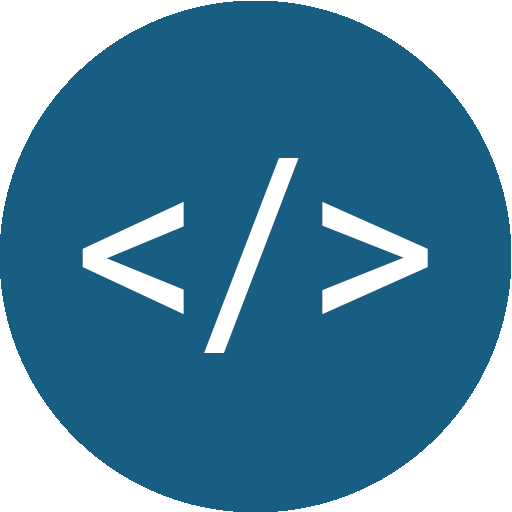
<style>
.page{position:relative;width:512px;height:512px;background:#185e82}
.page>*{position:absolute;margin:0}
.t1{font:253.1px "Roboto-Regular";color:#ffffff}
</style>
<div class="page">
<p class="t1" style="left:82px;top:158px;width:346px;height:195px">&lt;/&gt;</p>
</div>
